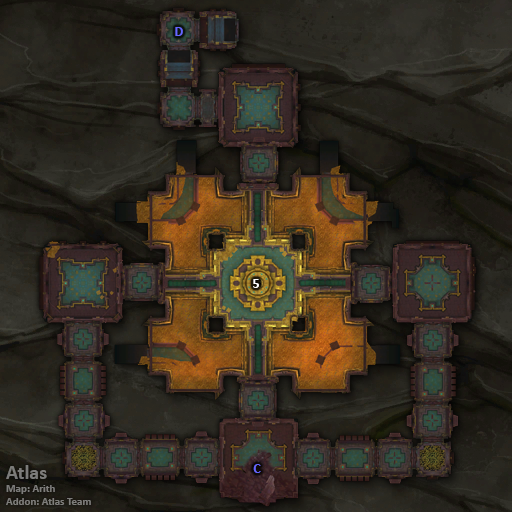
<style>
.page{position:relative;width:512px;height:512px}
.page>*{position:absolute;margin:0}
.t1{font:14px "Calibri-Bold";color:#6666ff}
.t2{font:14px "Calibri-Bold";color:#ffffff}
.t3{font:11px "Calibri-Bold";color:#7d7c7a}
.t4{font:20px "Calibri-Bold";color:#7d7c7a}
</style>
<div class="page">
<p class="t1" style="left:175px;top:27px;width:8px;height:9px">D</p>
<p class="t2" style="left:253px;top:279px;width:6px;height:9px">5</p>
<p class="t3" style="left:6px;top:465px;width:85px;height:40px"><span class="t4">Atlas<br></span>Map: Arith<br>Addon: Atlas Team</p>
<p class="t1" style="left:253px;top:464px;width:8px;height:9px">C</p>
</div>
